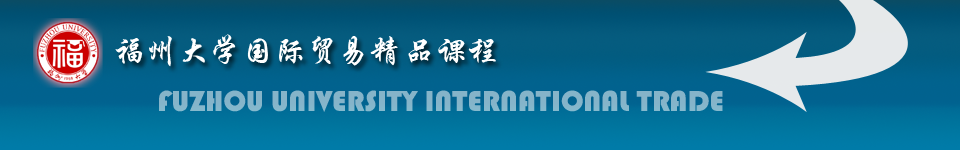
<style>
.page{position:relative;width:960px;height:150px}
.page>*{position:absolute;margin:0}
.t1{font:32.2px "STXingkai";color:#ffffff}
.t2{font:30px "STHupo";color:#85b4c9}
</style>
<div class="page">
<p class="t1" style="left:115px;top:34px;width:381px;height:33px">福州大学国际贸易精品课程</p>
<p class="t2" style="left:159px;top:90px;width:564px;height:22px">FUZHOU UNIVERSITY INTERNATIONAL TRADE</p>
</div>
